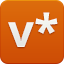
<style>
.page{position:relative;width:64px;height:64px}
.page>*{position:absolute;margin:0}
.t1{font:45.4px "OpenSans-Bold";color:#f6f7f2}
</style>
<div class="page">
<p class="t1" style="left:8px;top:12px;width:50px;height:35px">v*</p>
</div>
